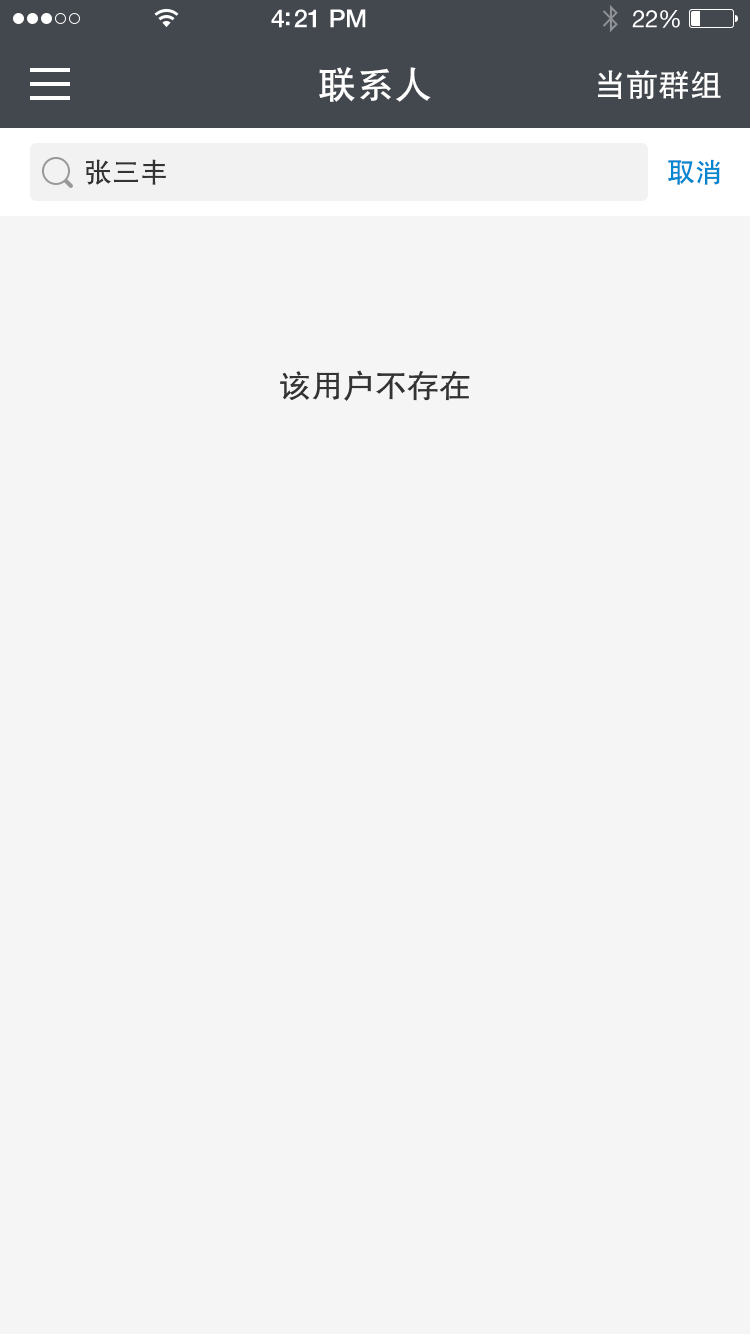
<style>
.page{position:relative;width:750px;height:1334px;background:#f5f5f5}
.page>*{position:absolute;margin:0}
.t1{font:38px "FZHTJW--GB1-0";color:#ffffff}
.t2{font:32px "FZHTJW--GB1-0";color:#ffffff}
.t3{font:28px "FZHTJW--GB1-0";color:#333333}
.t4{font:28px "FZHTJW--GB1-0";color:#0487d0}
.t5{font:32px "FZHTJW--GB1-0";color:#333333}
</style>
<div class="page">
<p class="t1" style="left:319px;top:67px;width:112px;height:35px">联系人</p>
<p class="t2" style="left:598px;top:70px;width:123px;height:29px">当前群组</p>
<p class="t3" style="left:86px;top:159px;width:80px;height:26px">张三丰</p>
<p class="t4" style="left:668px;top:159px;width:52px;height:26px">取消</p>
<p class="t5" style="left:280px;top:370px;width:190px;height:31px">该用户不存在</p>
</div>
